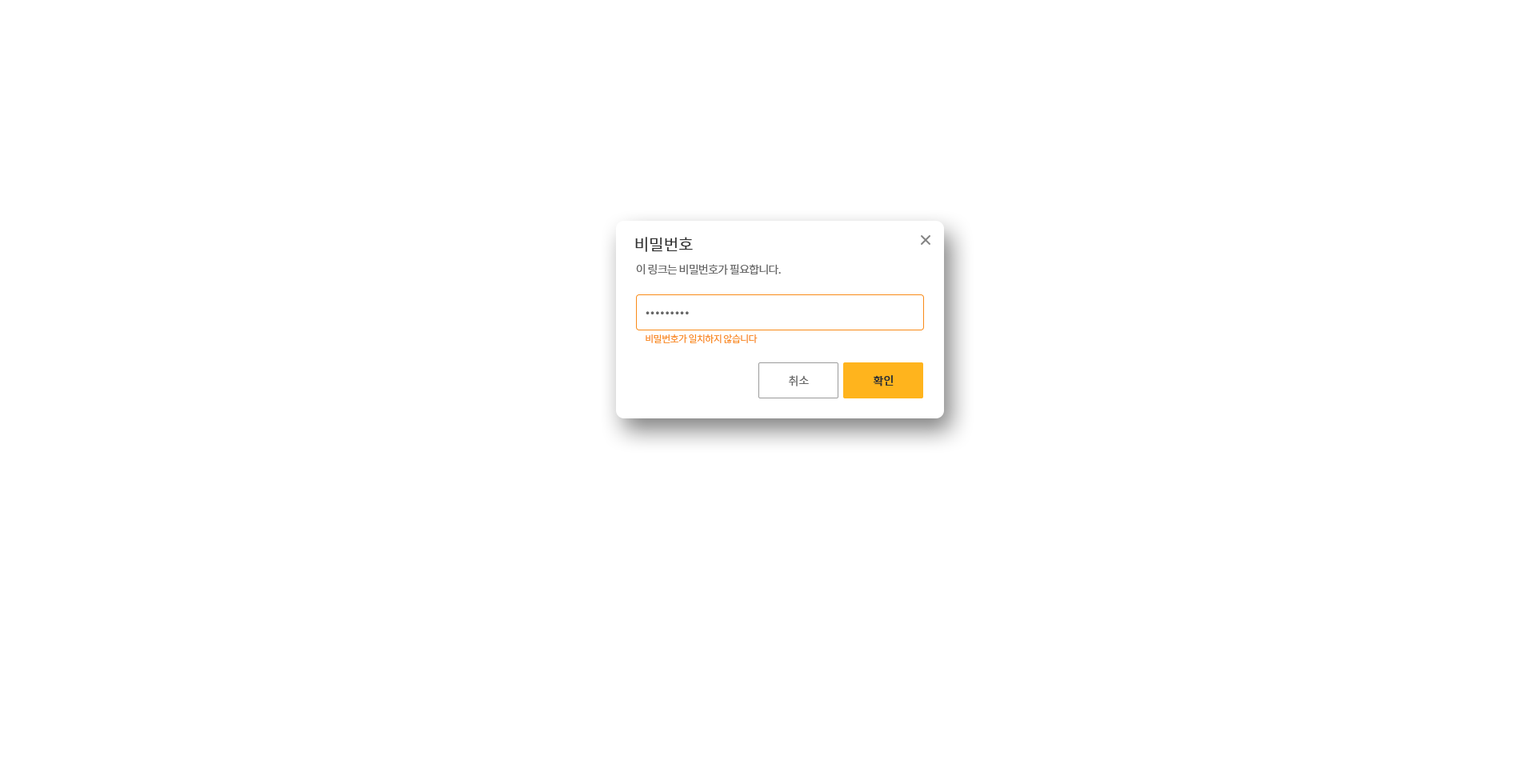
<style>
.page{position:relative;width:1536px;height:776px;background:#ffffff}
.page>*{position:absolute;margin:0}
.t1{font:16px "NotoSansCJKkr-DemiLight";color:#333333}
.t2{font:11.2px "NotoSansCJKkr-DemiLight";letter-spacing:-0.05em;color:#666666}
.t3{font:22.4px "NotoSansCJKkr-DemiLight";letter-spacing:-0.05em;color:#666666}
.t4{font:9.6px "NotoSansCJKkr-DemiLight";letter-spacing:-0.05em;color:#f98a17}
.t5{font:11.2px "NotoSansCJKkr-Regular";color:#666666}
.t6{font:11.2px "NotoSansCJKkr-Medium";color:#333333}
</style>
<div class="page">
<p class="t1" style="left:635px;top:237px;width:58px;height:15px">비밀번호</p>
<p class="t2" style="left:636px;top:264px;width:145px;height:11px">이 링크는 비밀번호가 필요합니다.</p>
<p class="t3" style="left:646px;top:311px;width:43px;height:3px">.........</p>
<p class="t4" style="left:646px;top:334px;width:112px;height:10px">비밀번호가 일치하지 않습니다</p>
<p class="t5" style="left:789px;top:375px;width:20px;height:11px">취소</p>
<p class="t6" style="left:874px;top:375px;width:20px;height:11px">확인</p>
</div>
